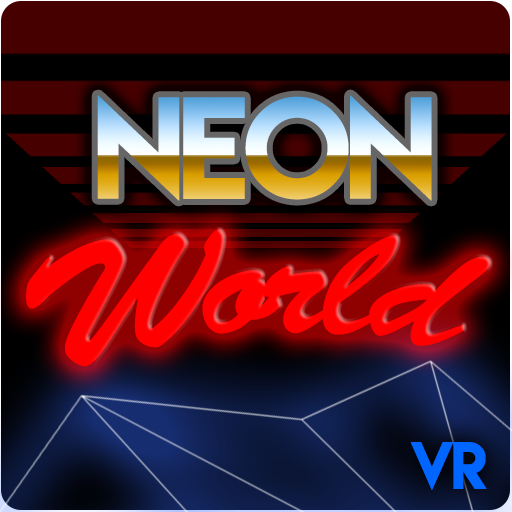
<style>
.page{position:relative;width:512px;height:512px}
.page>*{position:absolute;margin:0}
.t1{font:128.2px "LemonMilk";letter-spacing:-0.055em;font-weight:bold}
.t2{font:167.6px "BrushScriptStd";letter-spacing:-0.055em;color:#ff0000}
.t3{font:58.9px "LemonMilk";letter-spacing:-0.055em;color:#0066ff;font-weight:bold}
</style>
<div class="page">
<p class="t1" style="left:97px;top:95px;width:335px;height:106px">NEON</p>
<p class="t2" style="left:26px;top:229px;width:464px;height:138px;rotate:-3deg">World</p>
<p class="t3" style="left:410px;top:442px;width:77px;height:48px">VR</p>
</div>
